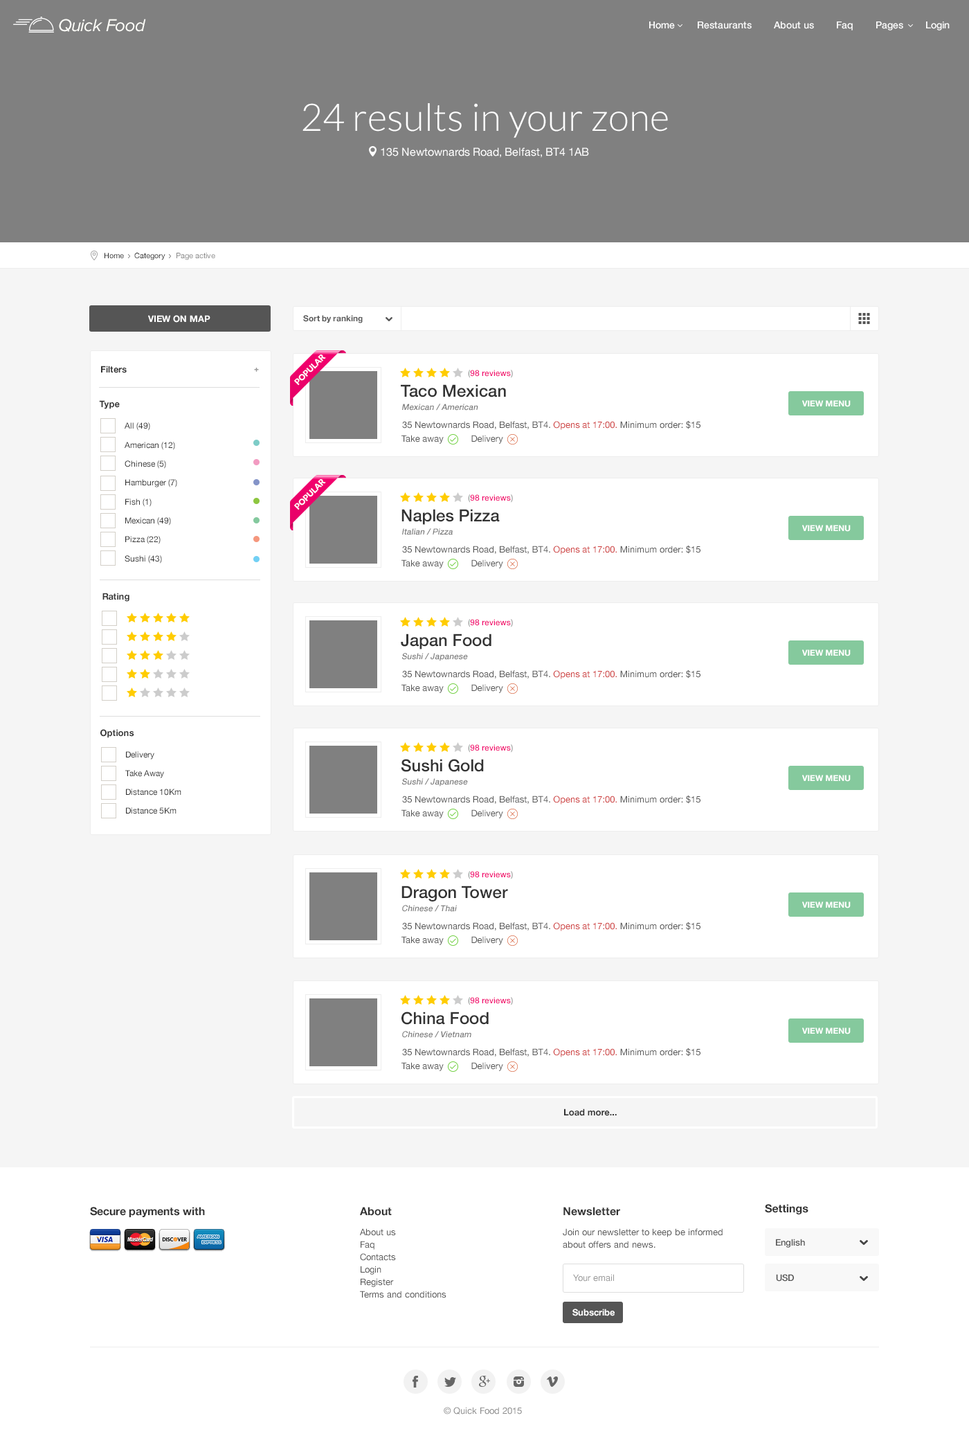
<style>
.page{position:relative;width:969px;height:1454px;background:#ffffff}
.page>*{position:absolute;margin:0}
.t1{font:18px "ProximaNova-RegularIt";letter-spacing:-0.025em;color:#fefef9}
.t2{font:9.7px "HelveticaNeue-Medium";color:#ffffff}
.t3{font:11.1px/24.9px "HelveticaNeue";color:#ffffff}
.t4{font:38.1px/16.6px "Lato-Light";color:#ffffff}
.t5{font:7.6px "HelveticaNeue";color:#252525}
.t6{font:7.6px "HelveticaNeue";color:#888888}
.t7{font:9px "HelveticaNeue-Bold";color:#ffffff;text-transform:uppercase}
.t8{font:8.3px "HelveticaNeue-Bold";color:#555555}
.t9{font:9px "HelveticaNeue-Bold";color:#333333}
.t10{font:8.3px "Lato-Black";color:#ffffff;text-transform:uppercase}
.t11{font:8.3px "Montserrat-Bold";color:#999999}
.t12{font:8.3px "HelveticaNeue-Medium";color:#f1006c}
.t13{font:8.3px "HelveticaNeue-Medium";color:#999999}
.t14{font:16.6px "HelveticaNeue-Medium";color:#333333}
.t15{font:8.3px "HelveticaNeue-Bold";color:#ffffff}
.t16{font:8.3px "HelveticaNeue-Medium";color:#777777;font-style:italic}
.t17{font:8.3px/18.9px "HelveticaNeue";color:#333333}
.t18{font:9px "HelveticaNeue";color:#555555}
.t19{font:9px "HelveticaNeue";color:#ce3b3b}
.t20{font:8.3px/18.7px "HelveticaNeue";color:#333333}
.t21{font:11.1px "HelveticaNeue-Bold";color:#333333}
.t22{font:9px/12.5px "HelveticaNeue";color:#555555}
.t23{font:9px "HelveticaNeue-Medium";color:#555555}
.t24{font:9px "HelveticaNeue";color:#999999}
.t25{font:9px "HelveticaNeue-Bold";color:#ffffff}
.t26{font:9px "HelveticaNeue";color:#8c8c8c}
</style>
<div class="page">
<p class="t1" style="left:59px;top:19px;width:87px;height:13px">Quick Food</p>
<p class="t2" style="left:649px;top:21px;width:301px;height:9px">Home        Restaurants        About us        Faq        Pages        Login</p>
<p class="t3" style="left:303px;top:103px;width:365px;height:55px;text-align:center"><span class="t4">24 results in your zone<br></span>135 Newtownards Road, Belfast, BT4 1AB</p>
<p class="t5" style="left:105px;top:253px;width:110px;height:7px">Home     Category     <span class="t6">Page active</span></p>
<p class="t7" style="left:148px;top:315px;width:62px;height:8px">VIEW ON MAP</p>
<p class="t8" style="left:303px;top:315px;width:60px;height:8px">Sort by ranking</p>
<p class="t9" style="left:101px;top:366px;width:26px;height:7px">Filters</p>
<p class="t10" style="left:294px;top:354px;width:32px;height:32px;rotate:-45deg">popular</p>
<p class="t11" style="left:254px;top:368px;width:5px;height:4px">+</p>
<p class="t12" style="left:468px;top:370px;width:45px;height:8px"><span class="t13">(</span>98 reviews<span class="t13">)</span></p>
<p class="t14" style="left:401px;top:384px;width:105px;height:13px">Taco Mexican</p>
<p class="t9" style="left:99px;top:400px;width:21px;height:9px">Type</p>
<p class="t15" style="left:802px;top:400px;width:49px;height:7px">VIEW MENU</p>
<p class="t16" style="left:402px;top:404px;width:76px;height:7px">Mexican / American</p>
<p class="t17" style="left:125px;top:422px;width:52px;height:142px">All (49)<br>American (12)<br>Chinese (5)<br>Hamburger (7)<br>Fish (1)<br>Mexican (49)<br>Pizza (22)<br>Sushi (43)</p>
<p class="t18" style="left:402px;top:420px;width:299px;height:10px">35 Newtownards Road, Belfast, BT4. <span class="t19">Opens at 17:00. </span>Minimum order: $15</p>
<p class="t18" style="left:402px;top:435px;width:101px;height:9px">Take away           Delivery</p>
<p class="t10" style="left:294px;top:479px;width:32px;height:31px;rotate:-45deg">popular</p>
<p class="t12" style="left:468px;top:494px;width:45px;height:9px"><span class="t13">(</span>98 reviews<span class="t13">)</span></p>
<p class="t14" style="left:402px;top:509px;width:98px;height:16px">Naples Pizza</p>
<p class="t16" style="left:402px;top:528px;width:51px;height:7px">Italian / Pizza</p>
<p class="t15" style="left:802px;top:525px;width:49px;height:7px">VIEW MENU</p>
<p class="t18" style="left:402px;top:545px;width:299px;height:10px">35 Newtownards Road, Belfast, BT4. <span class="t19">Opens at 17:00. </span>Minimum order: $15</p>
<p class="t18" style="left:402px;top:559px;width:101px;height:9px">Take away           Delivery</p>
<p class="t9" style="left:102px;top:593px;width:27px;height:9px">Rating</p>
<p class="t12" style="left:468px;top:619px;width:45px;height:8px"><span class="t13">(</span>98 reviews<span class="t13">)</span></p>
<p class="t14" style="left:401px;top:633px;width:91px;height:16px">Japan Food</p>
<p class="t16" style="left:402px;top:653px;width:66px;height:8px">Sushi / Japanese</p>
<p class="t15" style="left:802px;top:649px;width:49px;height:7px">VIEW MENU</p>
<p class="t18" style="left:402px;top:669px;width:299px;height:10px">35 Newtownards Road, Belfast, BT4. <span class="t19">Opens at 17:00. </span>Minimum order: $15</p>
<p class="t18" style="left:402px;top:684px;width:101px;height:9px">Take away           Delivery</p>
<p class="t9" style="left:100px;top:729px;width:34px;height:9px">Options</p>
<p class="t12" style="left:468px;top:744px;width:45px;height:9px"><span class="t13">(</span>98 reviews<span class="t13">)</span></p>
<p class="t20" style="left:125px;top:751px;width:56px;height:63px">Delivery<br>Take Away<br>Distance 10Km<br>Distance 5Km</p>
<p class="t14" style="left:401px;top:759px;width:83px;height:13px">Sushi Gold</p>
<p class="t16" style="left:402px;top:778px;width:66px;height:8px">Sushi / Japanese</p>
<p class="t15" style="left:802px;top:775px;width:49px;height:7px">VIEW MENU</p>
<p class="t18" style="left:402px;top:795px;width:299px;height:9px">35 Newtownards Road, Belfast, BT4. <span class="t19">Opens at 17:00. </span>Minimum order: $15</p>
<p class="t18" style="left:402px;top:809px;width:101px;height:9px">Take away           Delivery</p>
<p class="t12" style="left:468px;top:871px;width:45px;height:8px"><span class="t13">(</span>98 reviews<span class="t13">)</span></p>
<p class="t14" style="left:402px;top:885px;width:106px;height:16px">Dragon Tower</p>
<p class="t16" style="left:402px;top:905px;width:55px;height:7px">Chinese / Thai</p>
<p class="t15" style="left:802px;top:901px;width:49px;height:7px">VIEW MENU</p>
<p class="t18" style="left:402px;top:921px;width:299px;height:10px">35 Newtownards Road, Belfast, BT4. <span class="t19">Opens at 17:00. </span>Minimum order: $15</p>
<p class="t18" style="left:402px;top:936px;width:101px;height:9px">Take away           Delivery</p>
<p class="t12" style="left:468px;top:997px;width:45px;height:8px"><span class="t13">(</span>98 reviews<span class="t13">)</span></p>
<p class="t14" style="left:402px;top:1011px;width:87px;height:14px">China Food</p>
<p class="t16" style="left:402px;top:1031px;width:69px;height:7px">Chinese / Vietnam</p>
<p class="t15" style="left:802px;top:1027px;width:49px;height:7px">VIEW MENU</p>
<p class="t18" style="left:402px;top:1047px;width:299px;height:10px">35 Newtownards Road, Belfast, BT4. <span class="t19">Opens at 17:00. </span>Minimum order: $15</p>
<p class="t18" style="left:402px;top:1062px;width:101px;height:9px">Take away           Delivery</p>
<p class="t9" style="left:564px;top:1108px;width:53px;height:8px">Load more...</p>
<p class="t21" style="left:765px;top:1204px;width:44px;height:10px">Settings</p>
<p class="t21" style="left:90px;top:1207px;width:115px;height:10px">Secure payments with</p>
<p class="t21" style="left:360px;top:1207px;width:32px;height:9px">About</p>
<p class="t21" style="left:564px;top:1207px;width:56px;height:9px">Newsletter</p>
<p class="t22" style="left:360px;top:1228px;width:87px;height:70px">About us<br>Faq<br>Contacts<br>Login<br>Register<br>Terms and conditions</p>
<p class="t22" style="left:563px;top:1228px;width:160px;height:20px">Join our newsletter to keep be informed about offers and news.</p>
<p class="t23" style="left:776px;top:1239px;width:29px;height:9px">English</p>
<p class="t24" style="left:573px;top:1274px;width:41px;height:7px">Your email</p>
<p class="t23" style="left:776px;top:1274px;width:18px;height:7px">USD</p>
<p class="t25" style="left:573px;top:1308px;width:42px;height:8px">Subscribe</p>
<p class="t26" style="left:444px;top:1407px;width:78px;height:7px">© Quick Food 2015</p>
</div>
